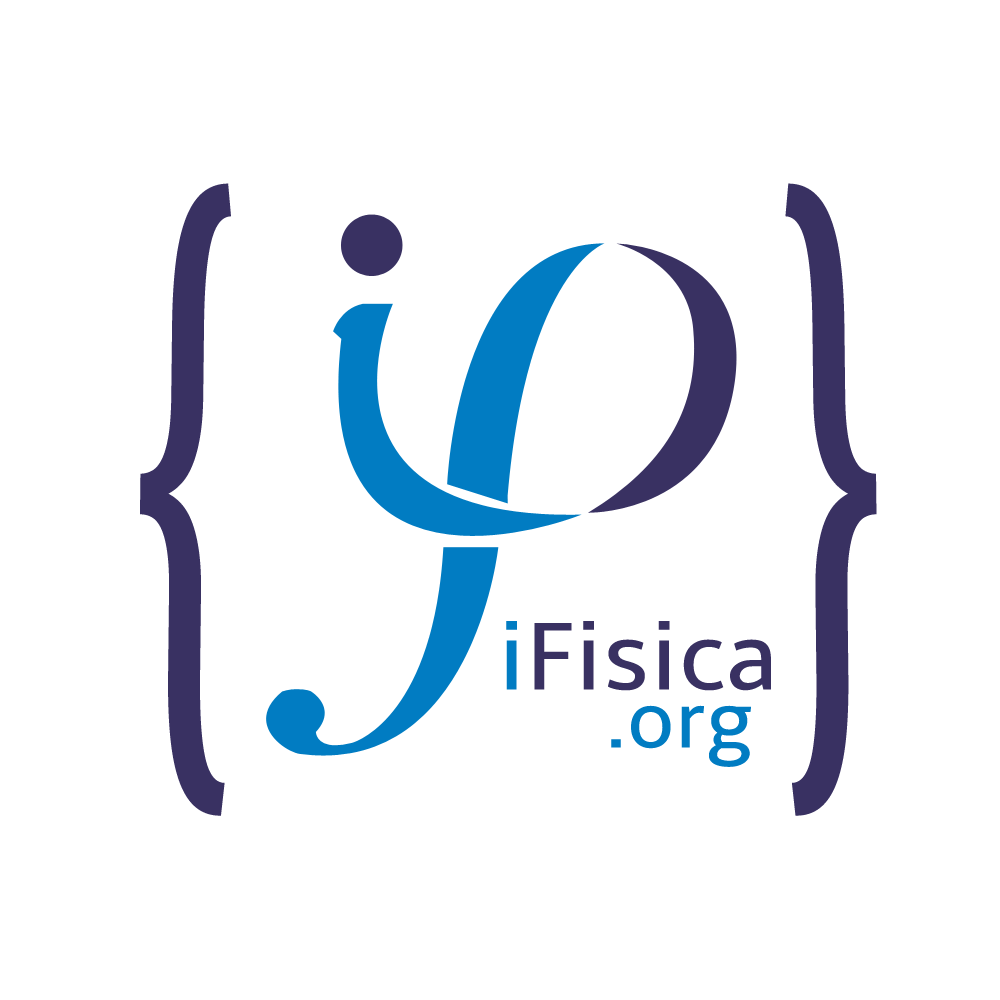
<style>
.page{position:relative;width:1000px;height:1000px;background:#ffffff}
.page>*{position:absolute;margin:0}
.t1{font:667.1px "Amble-Regular";color:#393162;scale:0.5 1}
.t2{font:99.4px "Amble-Regular";color:#393162}
.t3{font:99.4px "Amble-Regular";color:#017cc2}
.t4{font:82.9px "Amble-Regular";color:#017cc2}
</style>
<div class="page">
<p class="t1" style="left:140px;top:183px;width:91px;height:633px;rotate:-1deg">{</p>
<p class="t1" style="left:785px;top:183px;width:92px;height:633px;rotate:-179deg">{</p>
<p class="t2" style="left:506px;top:621px;width:265px;height:70px"><span class="t3">i</span>Fisica</p>
<p class="t4" style="left:611px;top:705px;width:140px;height:62px">.org</p>
</div>
